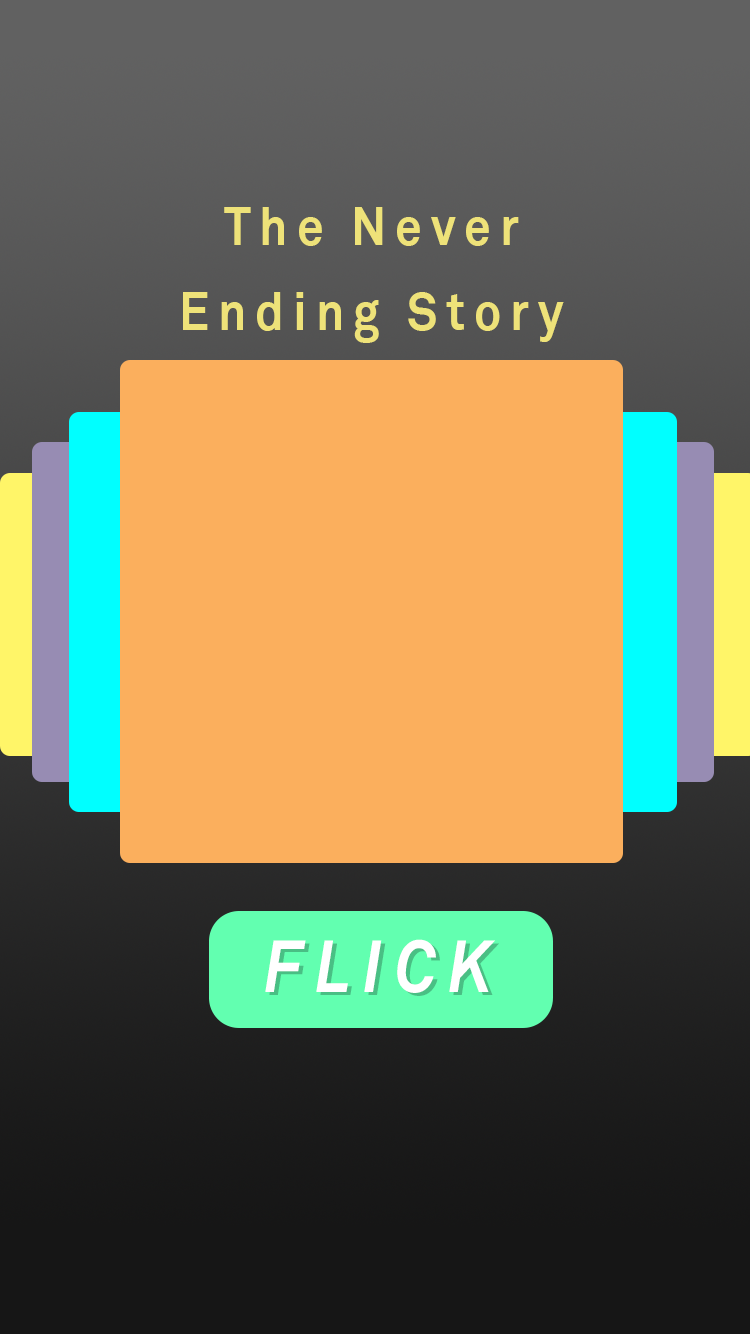
<style>
.page{position:relative;width:750px;height:1334px;background:#fbaf5d}
.page>*{position:absolute;margin:0}
.t1{font:52.8px/85px "Akkurat-Bold";letter-spacing:0.185em;color:#eee279;scale:0.91 1}
.t2{font:72.5px "Akkurat-BoldItalic";letter-spacing:0.185em;color:#ffffff;scale:0.91 1}
.t3{font:72.5px "Akkurat-BoldItalic";letter-spacing:0.185em;scale:0.91 1}
</style>
<div class="page">
<p class="t1" style="left:183px;top:207px;width:381px;height:136px;text-align:center">The Never Ending Story</p>
<p class="t2" style="left:265px;top:939px;width:230px;height:54px">FLICK</p>
<p class="t3" style="left:269px;top:942px;width:230px;height:54px">FLICK</p>
</div>
